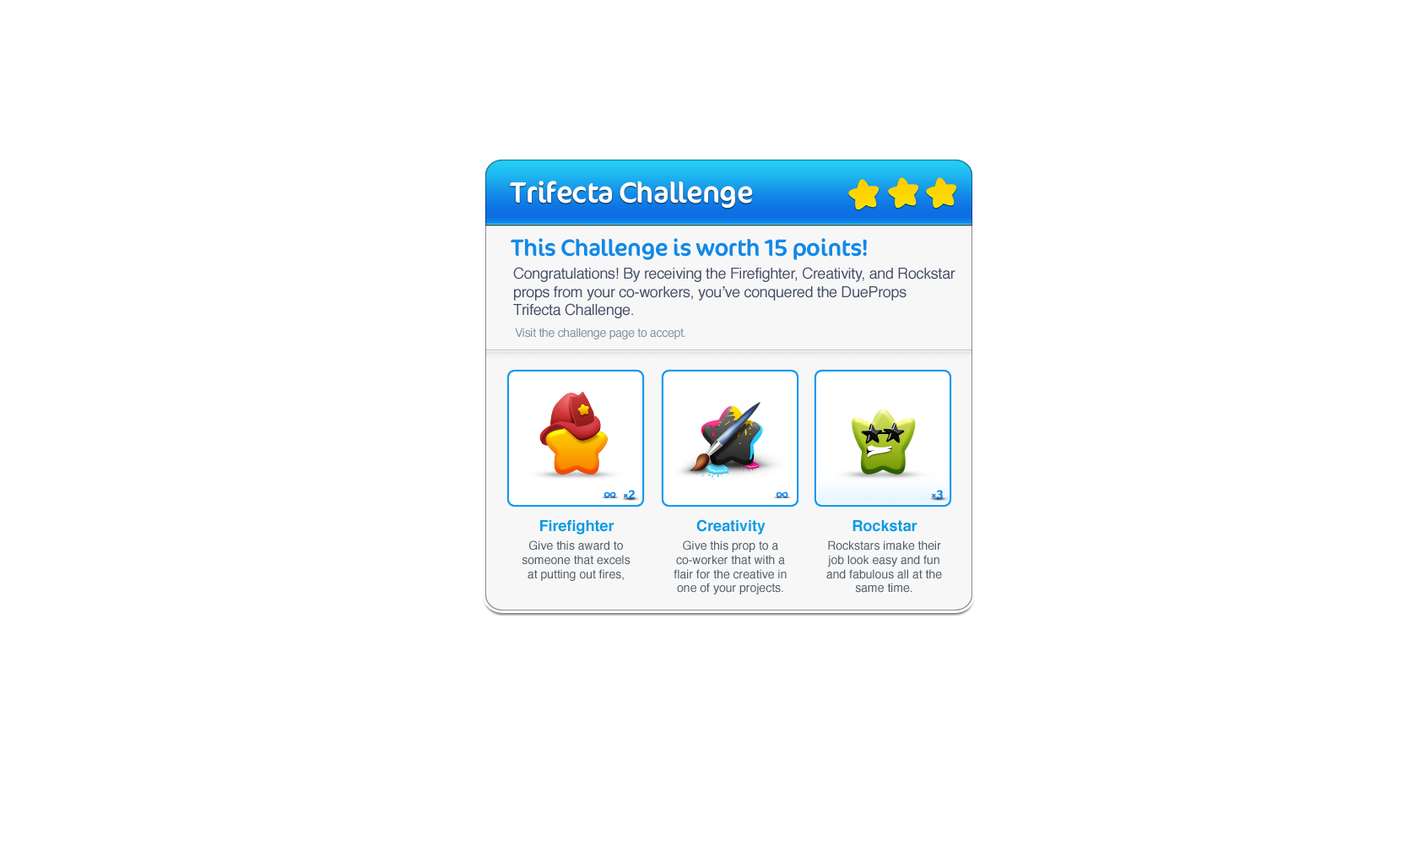
<style>
.page{position:relative;width:1418px;height:841px;background:#ffffff}
.page>*{position:absolute;margin:0}
.t1{font:29.5px "Cocon-Regular";letter-spacing:-0.02em;color:#ffffff}
.t2{font:23.6px "Cocon-Regular";letter-spacing:-0.02em;color:#1389e8}
.t3{font:15.2px "Helvetica";letter-spacing:-0.02em;color:#444c66}
.t4{font:11.8px "Helvetica";letter-spacing:-0.02em;color:#7f919c}
.t5{font:17.1px "MyriadPro-Regular";letter-spacing:-0.02em;color:#1389e8;font-weight:bold}
.t6{font:11.5px "Cocon-Regular";letter-spacing:-0.02em;color:#1389e8;font-weight:bold}
.t7{font:15.2px "Helvetica-Bold";color:#0d9ae3}
.t8{font:11.8px "Helvetica";color:#515d64}
</style>
<div class="page">
<p class="t1" style="left:510px;top:181px;width:243px;height:28px">Trifecta Challenge</p>
<p class="t2" style="left:511px;top:238px;width:356px;height:22px">This Challenge is worth 15 points!</p>
<p class="t3" style="left:513px;top:267px;width:443px;height:51px">Congratulations! By receiving the Firefighter, Creativity, and Rockstar props from your co-workers, you’ve conquered the DueProps <br>Trifecta Challenge.</p>
<p class="t4" style="left:515px;top:328px;width:170px;height:11px">Visit the challenge page to accept.</p>
<p class="t5" style="left:604px;top:491px;width:12px;height:6px">∞</p>
<p class="t6" style="left:629px;top:490px;width:6px;height:9px">2</p>
<p class="t5" style="left:776px;top:491px;width:12px;height:6px">∞</p>
<p class="t6" style="left:937px;top:490px;width:6px;height:9px">3</p>
<p class="t7" style="left:540px;top:520px;width:75px;height:14px">Firefighter</p>
<p class="t7" style="left:696px;top:519px;width:70px;height:15px">Creativity</p>
<p class="t7" style="left:853px;top:520px;width:65px;height:12px">Rockstar</p>
<p class="t8" style="left:522px;top:540px;width:109px;height:41px;text-align:center">Give this award to someone that excels at putting out fires,</p>
<p class="t8" style="left:674px;top:540px;width:113px;height:54px;text-align:center">Give this prop to a co-worker that with a flair for the creative in one of your projects.</p>
<p class="t8" style="left:826px;top:540px;width:116px;height:53px;text-align:center">Rockstars imake their job look easy and fun and fabulous all at the same time.</p>
</div>
